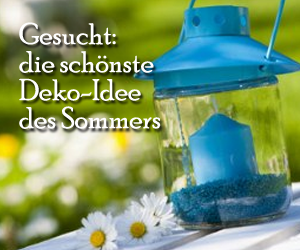
<style>
.page{position:relative;width:300px;height:250px}
.page>*{position:absolute;margin:0}
.t1{font:30px/28px "PoorRichard-Regular";color:#fefefe}
</style>
<div class="page">
<p class="t1" style="left:19px;top:22px;width:142px;height:107px">Gesucht: <br>die schönste <br>Deko-Idee <br>des Sommers</p>
</div>
